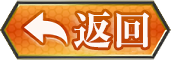
<style>
.page{position:relative;width:171px;height:60px}
.page>*{position:absolute;margin:0}
.t1{font:40px "RyuminPr6N-ExBold";color:#fff9f4}
</style>
<div class="page">
<p class="t1" style="left:74px;top:11px;width:75px;height:37px">返回</p>
</div>
